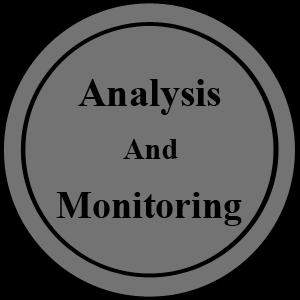
<style>
.page{position:relative;width:300px;height:300px;background:#747373}
.page>*{position:absolute;margin:0}
.t1{font:40px "TimesNewRomanPS-BoldMT";color:#010101}
.t2{font:30px "TimesNewRomanPS-BoldMT";color:#010101}
.t3{font:38px "TimesNewRomanPS-BoldMT";color:#010101}
</style>
<div class="page">
<p class="t1" style="left:78px;top:79px;width:143px;height:36px">Analysis</p>
<p class="t2" style="left:123px;top:139px;width:55px;height:20px">And</p>
<p class="t3" style="left:56px;top:192px;width:186px;height:34px">Monitoring</p>
</div>
